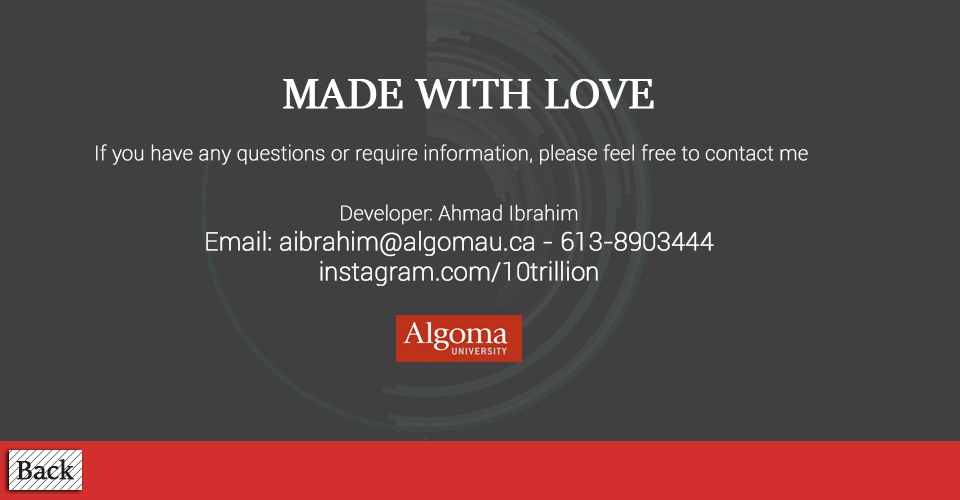
<style>
.page{position:relative;width:960px;height:500px;background:#404042}
.page>*{position:absolute;margin:0}
.t1{font:48px "SitkaBanner";color:#ffffff;font-weight:bold}
.t2{font:20px/30px "Roboto-Thin";color:#ffffff;font-weight:bold}
.t3{font:25px/30px "Roboto-Thin";color:#ffffff;font-weight:bold}
.t4{font:30px "SitkaBanner";color:#1e1e1e;font-weight:bold}
</style>
<div class="page">
<p class="t1" style="left:283px;top:79px;width:371px;height:30px">MADE WITH LOVE</p>
<p class="t2" style="left:96px;top:144px;width:712px;height:142px">If you have any questions or require information, please feel free to contact me<br><br>Developer: Ahmad Ibrahim<br><span class="t3">Email: aibrahim@algomau.ca - 613-8903444<br>instagram.com/10trillion</span></p>
<p class="t4" style="left:16px;top:459px;width:59px;height:21px">Back</p>
</div>
